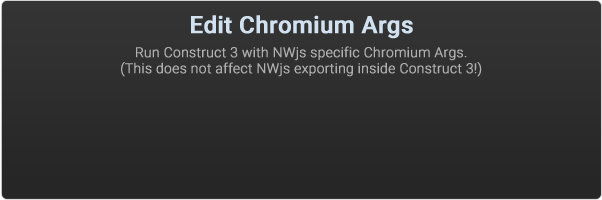
<style>
.page{position:relative;width:602px;height:200px}
.page>*{position:absolute;margin:0}
.t1{font:23.7px "Roboto-Medium";color:#d2e1f0;font-weight:bold}
.t2{font:13.8px/16px "Roboto-Light";color:#afafaf;font-weight:bold}
</style>
<div class="page">
<p class="t1" style="left:191px;top:15px;width:222px;height:24px">Edit Chromium Args</p>
<p class="t2" style="left:121px;top:46px;width:361px;height:31px;text-align:center">Run Construct 3 with NWjs specific Chromium Args.<br>(This does not affect NWjs exporting inside Construct 3!)</p>
</div>
